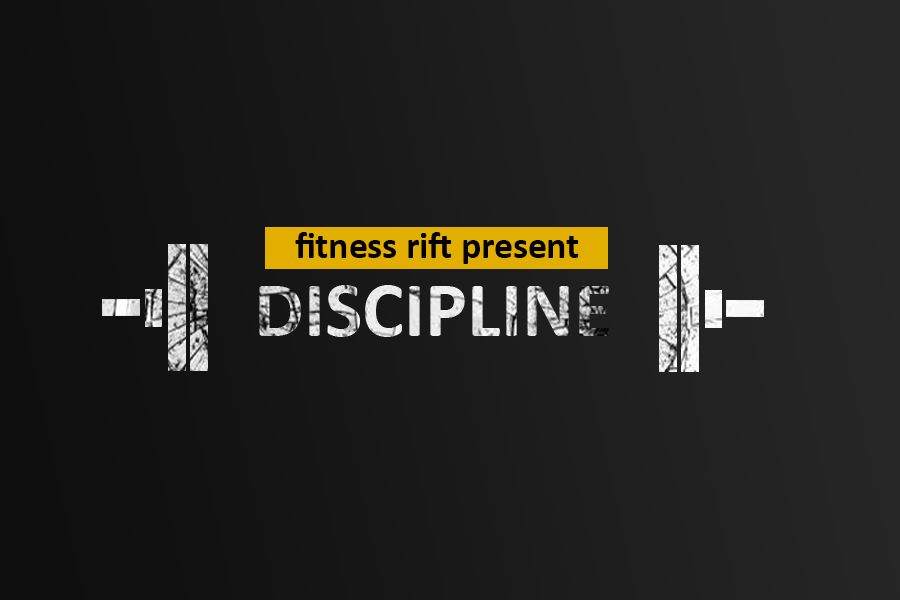
<style>
.page{position:relative;width:900px;height:600px}
.page>*{position:absolute;margin:0}
.t1{font:37.5px "Calibri-Bold";color:#000000}
.t2{font:79.2px "Calibri-Bold"}
</style>
<div class="page">
<p class="t1" style="left:295px;top:232px;width:284px;height:32px">fitness rift present</p>
<p class="t2" style="left:259px;top:285px;width:350px;height:52px">DISCIPLINE</p>
</div>
